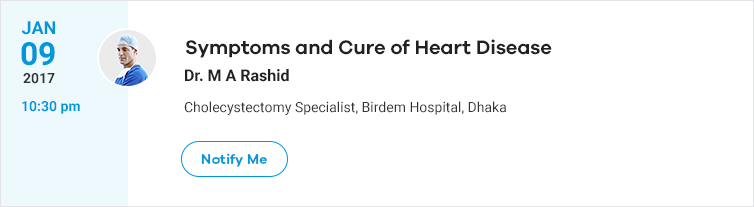
<style>
.page{position:relative;width:754px;height:207px;background:#ffffff}
.page>*{position:absolute;margin:0}
.t1{font:18px "Roboto-Bold";color:#0097db}
.t2{font:20px "GalanoGrotesque-SemiBold";color:#212121}
.t3{font:32px "Roboto-Bold";color:#0097db}
.t4{font:14px "Roboto-Bold";color:#333333}
.t5{font:16px "Roboto-Bold";color:#212121}
.t6{font:14px "Roboto-Bold";color:#0097db}
.t7{font:14px "Roboto-Regular";color:#333333}
.t8{font:14px "GalanoGrotesque-SemiBold";color:#0097db}
</style>
<div class="page">
<p class="t1" style="left:21px;top:21px;width:34px;height:14px">JAN</p>
<p class="t2" style="left:186px;top:39px;width:366px;height:19px">Symptoms and Cure of Heart Disease</p>
<p class="t3" style="left:21px;top:42px;width:34px;height:24px">09</p>
<p class="t4" style="left:23px;top:73px;width:32px;height:11px">2017</p>
<p class="t5" style="left:185px;top:69px;width:104px;height:13px">Dr. M A Rashid</p>
<p class="t6" style="left:22px;top:101px;width:58px;height:13px">10:30 pm</p>
<p class="t7" style="left:184px;top:101px;width:322px;height:14px">Cholecystectomy Specialist, Birdem Hospital, Dhaka</p>
<p class="t8" style="left:201px;top:153px;width:66px;height:14px">Notify Me</p>
</div>
